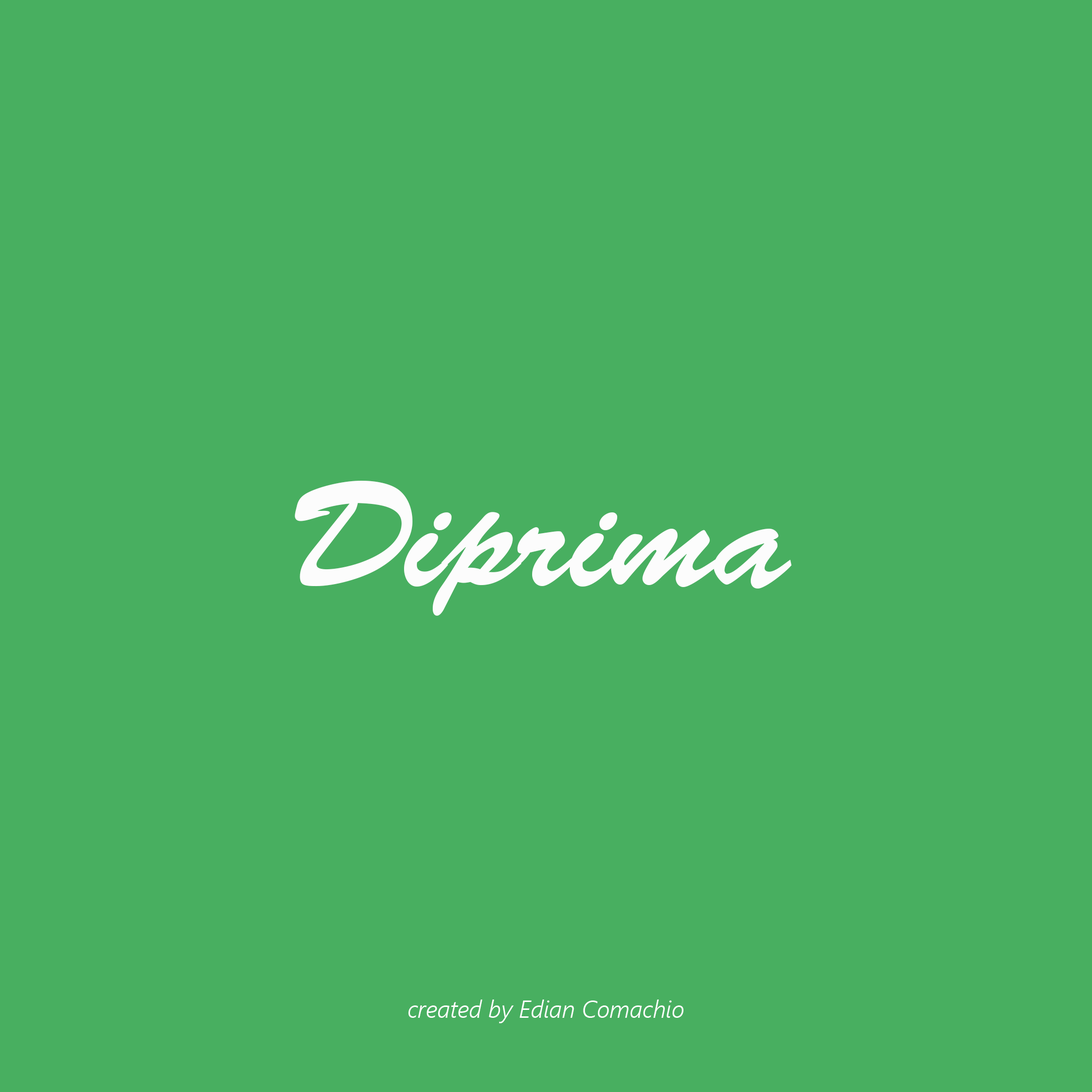
<style>
.page{position:relative;width:1092px;height:1092px;background:#48af60}
.page>*{position:absolute;margin:0}
.t1{font:148.4px "BrushScriptStd";color:#fcfcfc}
.t2{font:24px "SegoeUI-SemilightItalic";color:#ffffff}
</style>
<div class="page">
<p class="t1" style="left:295px;top:481px;width:497px;height:135px">Diprima</p>
<p class="t2" style="left:408px;top:1000px;width:275px;height:23px">created by Edian Comachio</p>
</div>
